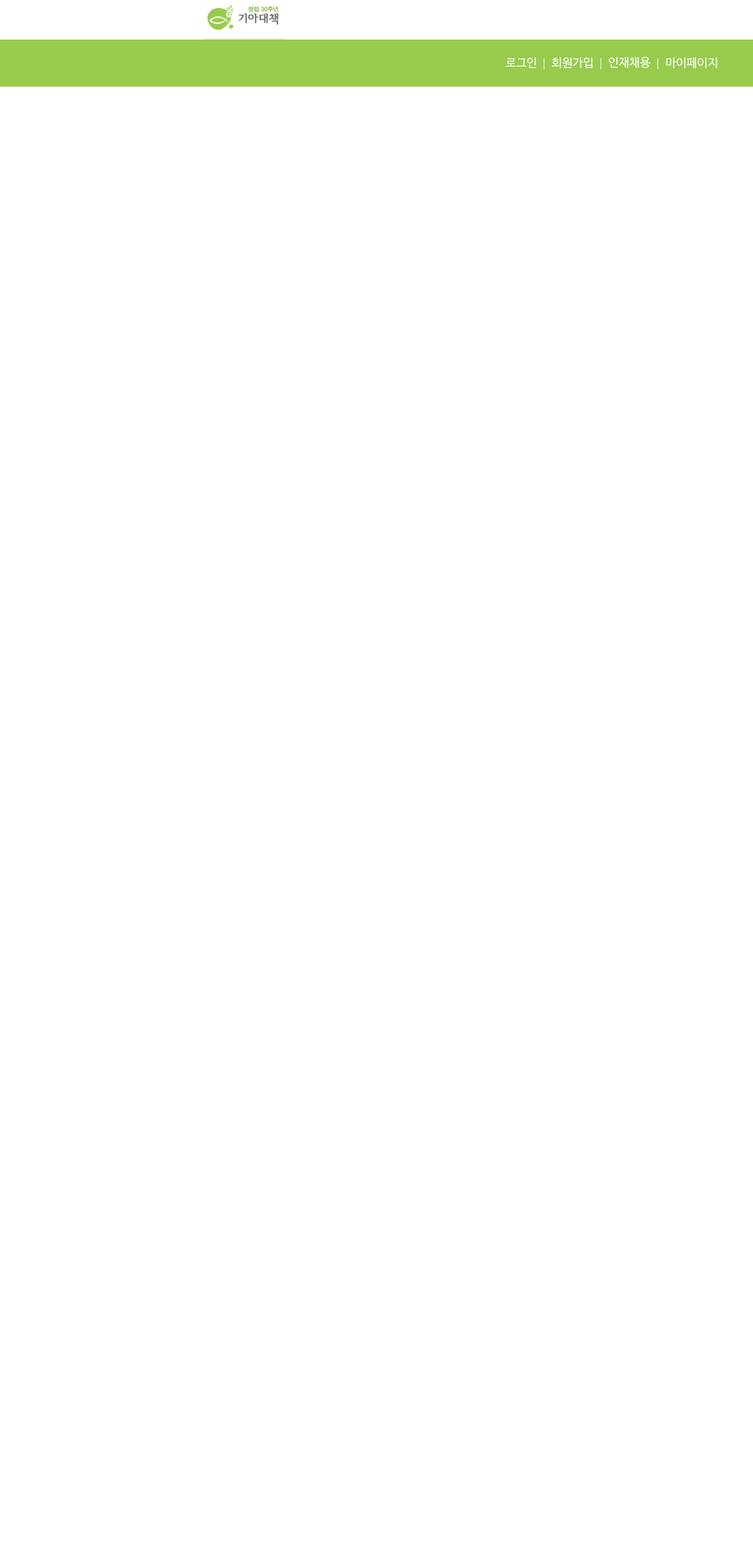
<style>
.page{position:relative;width:753px;height:1568px;background:#ffffff}
.page>*{position:absolute;margin:0}
.t1{font:11.8px "NanumBarunGothic";letter-spacing:0.005em;color:#ffffff}
.t2{font:11.8px "NanumBarunGothic";letter-spacing:0.005em;color:#eaeaea}
</style>
<div class="page">
<p class="t1" style="left:505px;top:57px;width:31px;height:11px">로그인</p>
<p class="t2" style="left:543px;top:58px;width:1px;height:11px">|</p>
<p class="t1" style="left:552px;top:57px;width:40px;height:11px">회원가입</p>
<p class="t2" style="left:600px;top:58px;width:1px;height:11px">|</p>
<p class="t1" style="left:608px;top:57px;width:42px;height:11px">인재채용</p>
<p class="t2" style="left:657px;top:58px;width:1px;height:11px">|</p>
<p class="t1" style="left:666px;top:57px;width:51px;height:11px">마이페이지</p>
</div>
